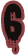
<style>
.page{position:relative;width:25px;height:55px;background:#130f0c}
.page>*{position:absolute;margin:0}
.t1{font:45.8px "CSNPWDTNFI";color:#130f0c}
</style>
<div class="page">
<p class="t1" style="left:4px;top:3px;width:18px;height:49px">6</p>
</div>
